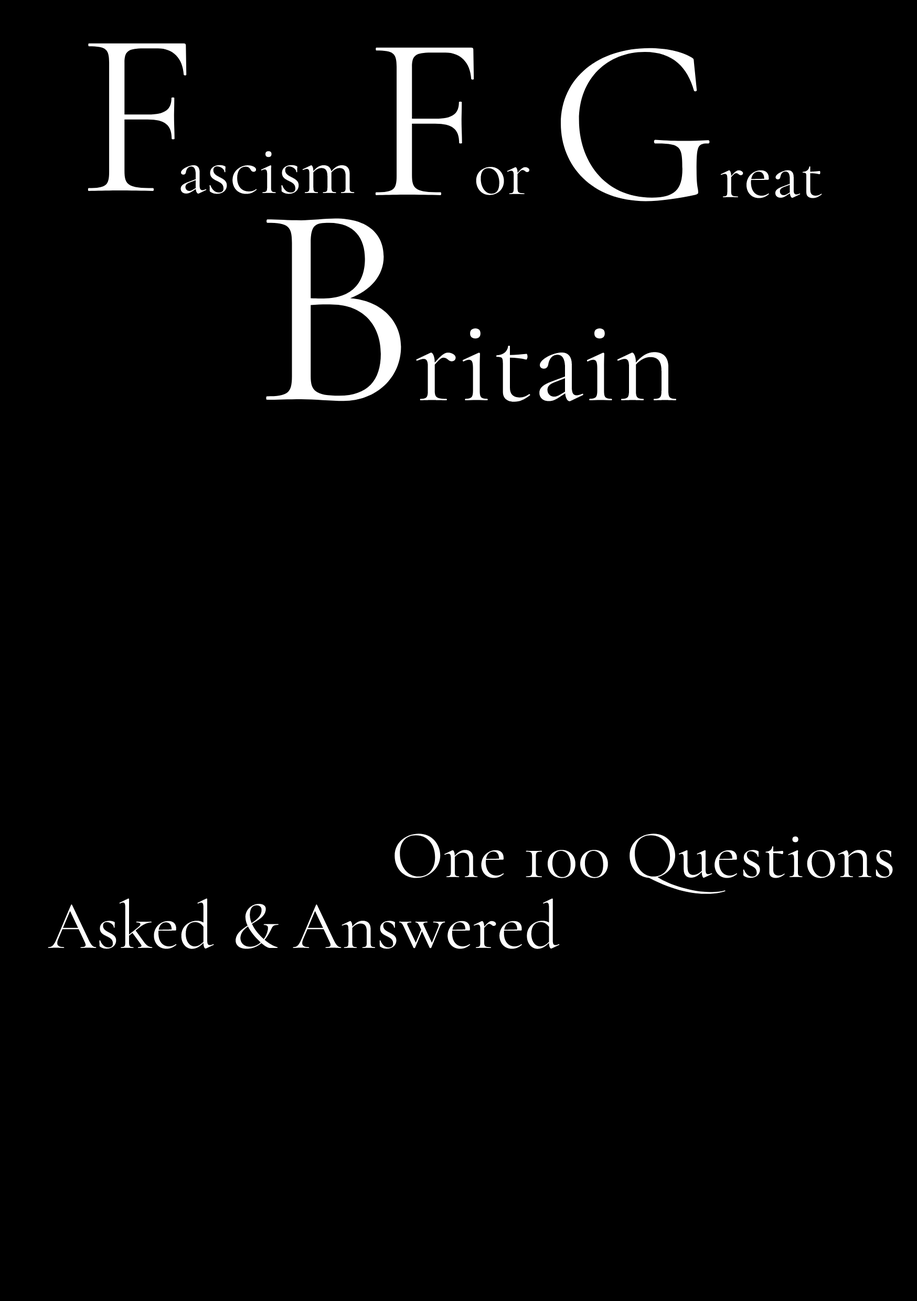
<style>
.page{position:relative;width:917px;height:1301px;background:#000000}
.page>*{position:absolute;margin:0}
.t1{font:236px "CormorantGaramond-Regular";color:#ffffff}
.t2{font:70.3px "CormorantGaramond-Regular";color:#ffffff}
.t3{font:68.2px "CormorantGaramond-Regular";color:#ffffff}
.t4{font:288.5px "CormorantGaramond-Regular";color:#ffffff}
.t5{font:120.6px "CormorantGaramond-Regular";color:#ffffff}
.t6{font:68.2px "CormorantGaramond-Regular";color:#ffffff;font-style:italic}
</style>
<div class="page">
<p class="t1" style="left:88px;top:43px;width:99px;height:148px">F</p>
<p class="t1" style="left:375px;top:47px;width:99px;height:148px">F</p>
<p class="t1" style="left:561px;top:48px;width:149px;height:153px">G</p>
<p class="t2" style="left:180px;top:151px;width:175px;height:43px">ascism</p>
<p class="t3" style="left:476px;top:167px;width:53px;height:28px">or</p>
<p class="t3" style="left:720px;top:166px;width:102px;height:32px">reat</p>
<p class="t4" style="left:266px;top:218px;width:135px;height:183px">B</p>
<p class="t5" style="left:415px;top:328px;width:262px;height:74px">ritain</p>
<p class="t3" style="left:394px;top:833px;width:499px;height:61px">One 100 Questions</p>
<p class="t3" style="left:48px;top:898px;width:512px;height:51px">Asked <span class="t6">&amp; </span>Answered</p>
</div>
